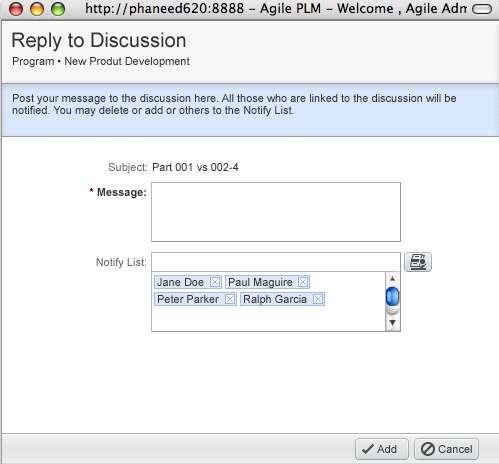
<style>
.page{position:relative;width:499px;height:464px;background:#ffffff}
.page>*{position:absolute;margin:0}
.t1{font:20px "ArialMT";color:#333333}
.t2{font:11px "ArialMT";color:#333333}
.t3{font:11px/12px "ArialMT";color:#333333}
.t4{font:11px "ArialMT";color:#666666}
.t5{font:11px "Arial-BoldMT";color:#333333}
.t6{font:11px "Arial-BoldMT";color:#990000}
</style>
<div class="page">
<p class="t1" style="left:12px;top:32px;width:174px;height:20px">Reply to Discussion</p>
<p class="t2" style="left:13px;top:57px;width:177px;height:11px">Program • New Produt Development</p>
<p class="t3" style="left:12px;top:94px;width:444px;height:23px">Post your message to the discussion here. All those who are linked to the discussion will be <br>notified. You may delete or add or others to the Notify List.</p>
<p class="t4" style="left:108px;top:163px;width:39px;height:11px">Subject:</p>
<p class="t2" style="left:153px;top:163px;width:86px;height:8px">Part 001 vs 002-4</p>
<p class="t5" style="left:89px;top:188px;width:57px;height:11px"><span class="t6">*</span> Message:</p>
<p class="t4" style="left:96px;top:258px;width:50px;height:11px">Notify List:</p>
<p class="t2" style="left:377px;top:445px;width:20px;height:8px">Add</p>
<p class="t2" style="left:438px;top:445px;width:34px;height:8px">Cancel</p>
</div>
